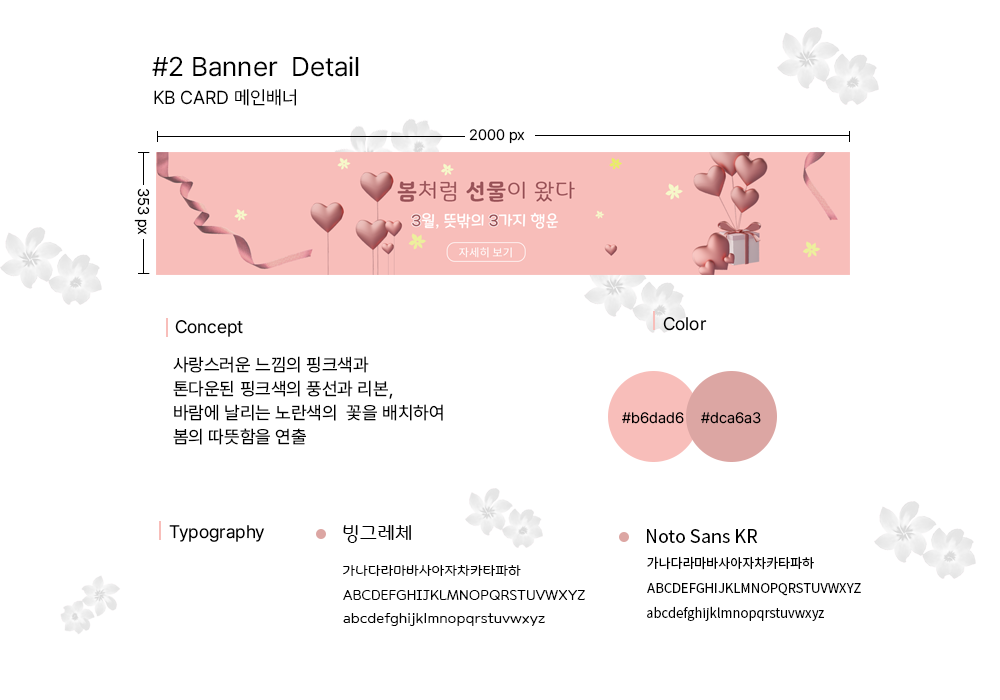
<style>
.page{position:relative;width:1000px;height:700px;background:#ffffff}
.page>*{position:absolute;margin:0}
.t1{font:27px "Pretendard-Regular";color:#000000}
.t2{font:18.7px "Pretendard-Regular";color:#000000}
.t3{font:15px "Pretendard-Regular";color:#000000}
.t4{font:15.4px "Pretendard-Regular";color:#000000}
.t5{font:18px "Pretendard-Regular";color:#000000}
.t6{font:18px/24px "Pretendard-Regular";color:#000000}
.t7{font:18px "Binggrae";color:#000000}
.t8{font:18px "NotoSansKR-Regular";color:#000000}
.t9{font:13px "NotoSansKR-Regular";color:#000000}
.t10{font:13px "Binggrae";color:#000000}
</style>
<div class="page">
<p class="t1" style="left:152px;top:56px;width:207px;height:21px">#2 Banner  Detail</p>
<p class="t2" style="left:154px;top:89px;width:142px;height:17px">KB CARD 메인배너</p>
<p class="t3" style="left:469px;top:129px;width:56px;height:15px">2000 px</p>
<p class="t4" style="left:134px;top:188px;width:16px;height:47px;rotate:90deg">353 px</p>
<p class="t5" style="left:663px;top:317px;width:44px;height:14px">Color</p>
<p class="t5" style="left:175px;top:320px;width:68px;height:17px">Concept</p>
<p class="t6" style="left:173px;top:356px;width:270px;height:89px">사랑스러운 느낌의 핑크색과<br>톤다운된 핑크색의 풍선과 리본,<br>바람에 날리는 노란색의  꽃을 배치하여<br>봄의 따뜻함을 연출</p>
<p class="t3" style="left:622px;top:412px;width:62px;height:12px">#b6dad6</p>
<p class="t3" style="left:701px;top:412px;width:60px;height:12px">#dca6a3</p>
<p class="t5" style="left:169px;top:525px;width:96px;height:17px">Typography</p>
<p class="t7" style="left:343px;top:525px;width:68px;height:18px">빙그레체</p>
<p class="t8" style="left:647px;top:529px;width:111px;height:14px">Noto Sans KR</p>
<p class="t9" style="left:647px;top:556px;width:167px;height:14px">가나다라마바사아자차카타파하</p>
<p class="t10" style="left:343px;top:565px;width:178px;height:11px">가나다라마바사아자차카타파하</p>
<p class="t10" style="left:343px;top:590px;width:242px;height:10px">ABCDEFGHIJKLMNOPQRSTUVWXYZ</p>
<p class="t9" style="left:647px;top:583px;width:214px;height:13px">ABCDEFGHIJKLMNOPQRSTUVWXYZ</p>
<p class="t9" style="left:647px;top:606px;width:177px;height:15px">abcdefghijklmnopqrstuvwxyz</p>
<p class="t10" style="left:343px;top:613px;width:202px;height:13px">abcdefghijklmnopqrstuvwxyz</p>
</div>
